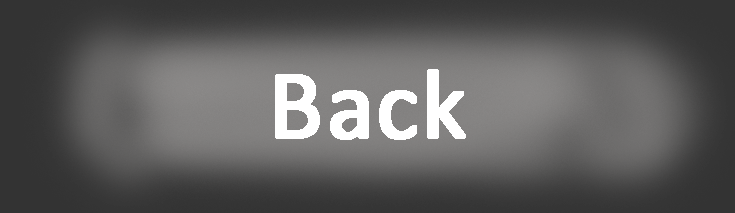
<style>
.page{position:relative;width:735px;height:213px}
.page>*{position:absolute;margin:0}
.t1{font:100px "Calibri";color:#ffffff;font-weight:bold}
</style>
<div class="page">
<p class="t1" style="left:275px;top:69px;width:191px;height:71px">Back</p>
</div>
